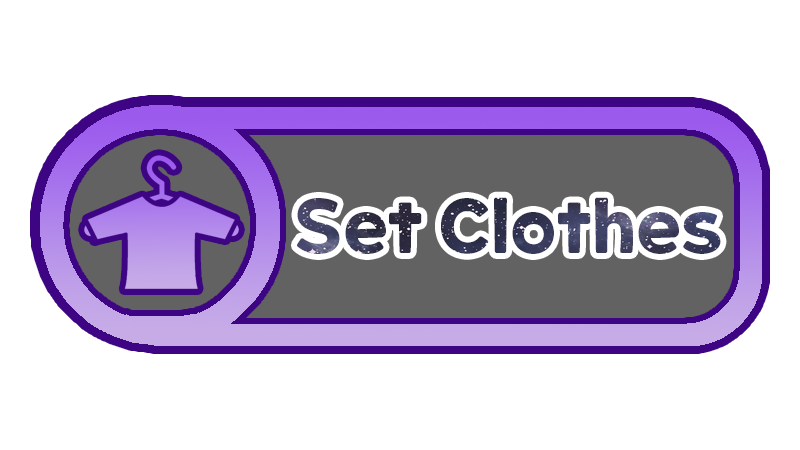
<style>
.page{position:relative;width:800px;height:450px;background:#ffffff}
.page>*{position:absolute;margin:0}
.t1{font:72px "ONEMobilePOPOTFRegular"}
</style>
<div class="page">
<p class="t1" style="left:297px;top:197px;width:424px;height:57px">Set Clothes</p>
</div>
